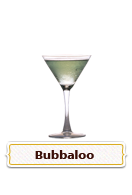
<style>
.page{position:relative;width:132px;height:195px;background:#ffffff}
.page>*{position:absolute;margin:0}
.t1{font:11.4px "Humanist777BT-BlackB";color:#3a0f07;scale:1.05 1}
</style>
<div class="page">
<p class="t1" style="left:35px;top:150px;width:59px;height:9px">Bubbaloo</p>
</div>
